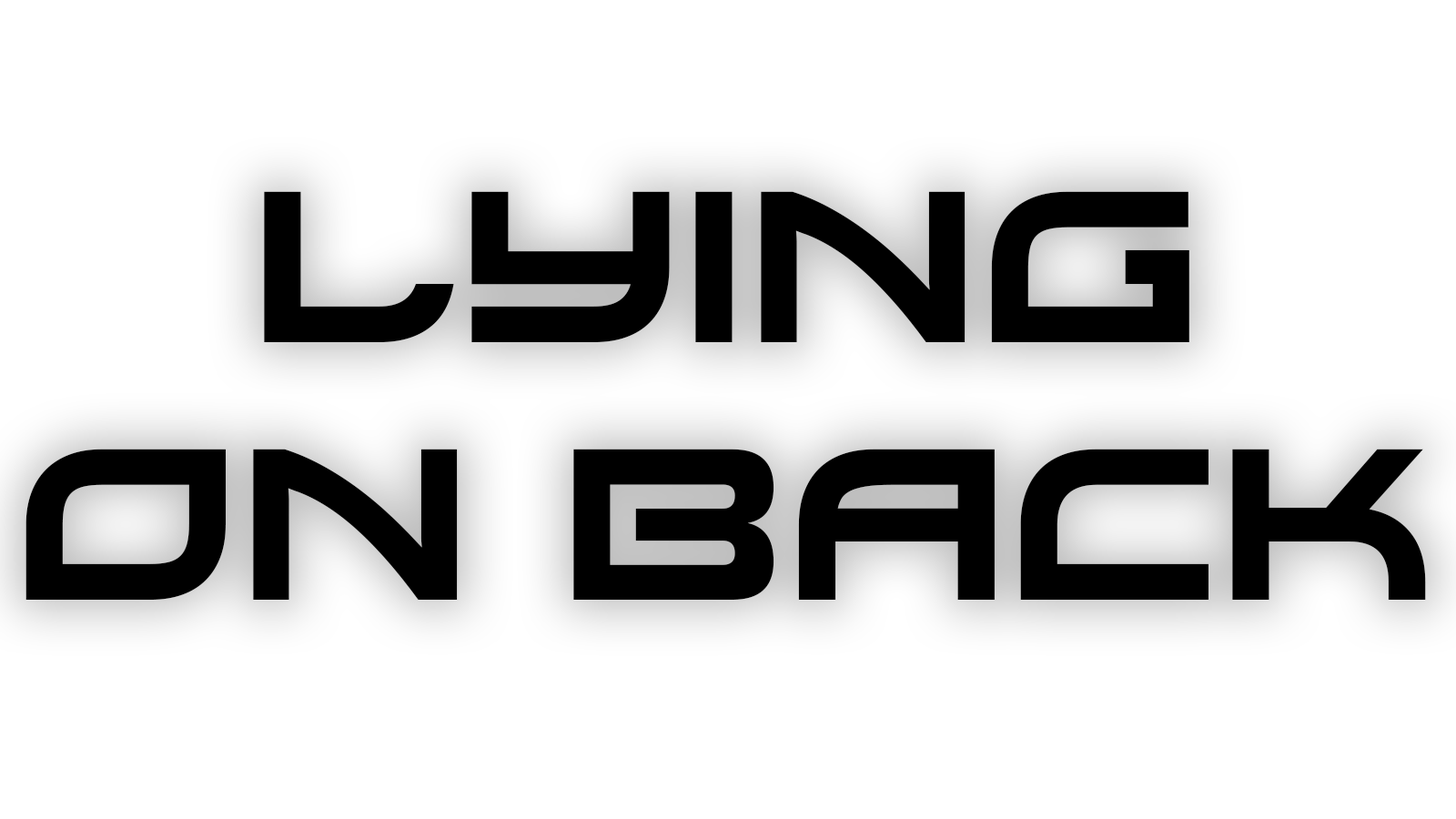
<style>
.page{position:relative;width:1456px;height:819px;background:#ffffff}
.page>*{position:absolute;margin:0}
.t1{font:214.9px "Xirod-Regular";color:#000000}
</style>
<div class="page">
<p class="t1" style="left:25px;top:191px;width:1401px;height:409px;text-align:center">Lying<br>on Back</p>
</div>
